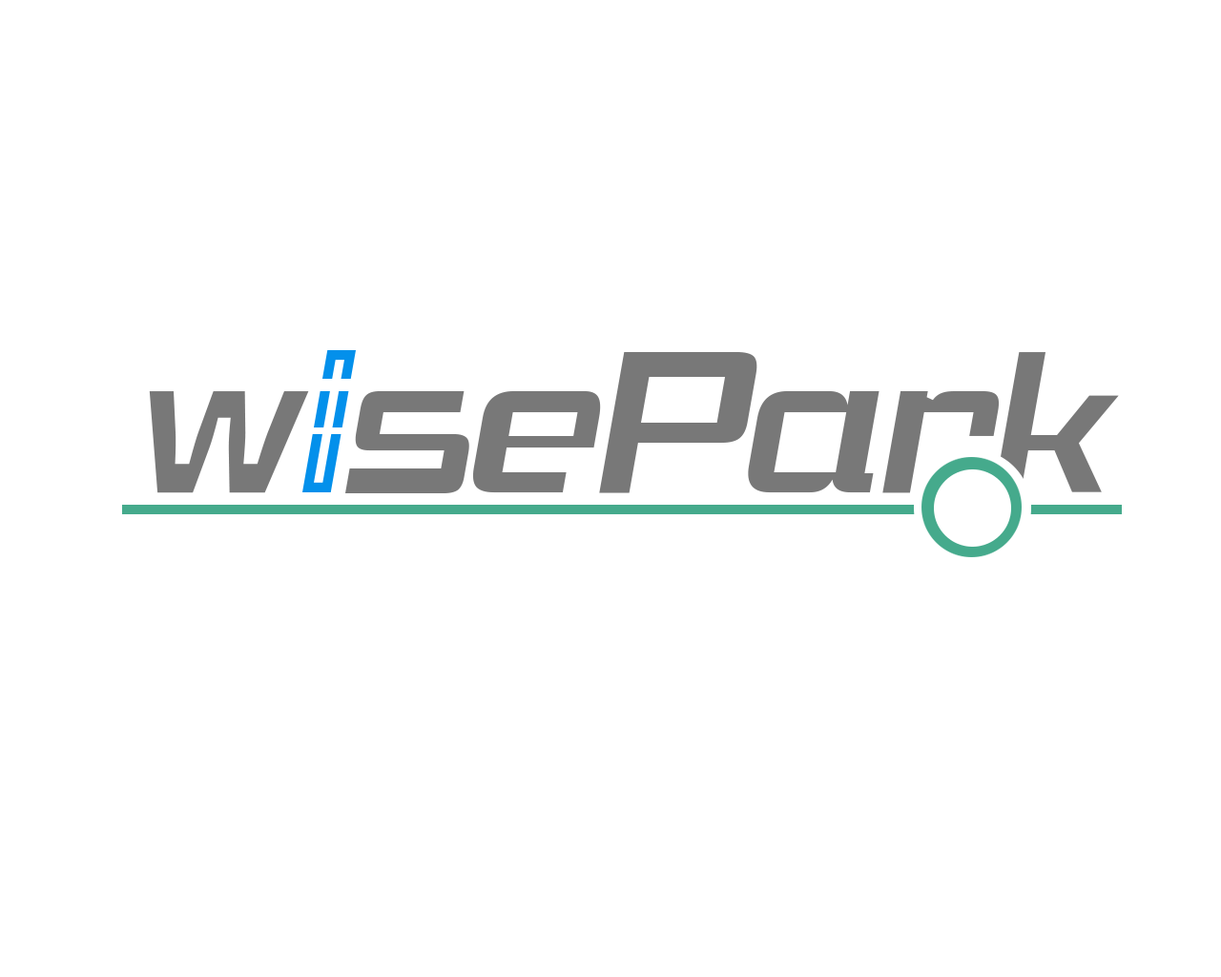
<style>
.page{position:relative;width:1221px;height:977px;background:#ffffff}
.page>*{position:absolute;margin:0}
.t1{font:206px "DFSoGei-W5-WING-RKSJ-H";color:#787878;font-style:italic}
</style>
<div class="page">
<p class="t1" style="left:149px;top:350px;width:970px;height:143px">wisePark</p>
</div>
